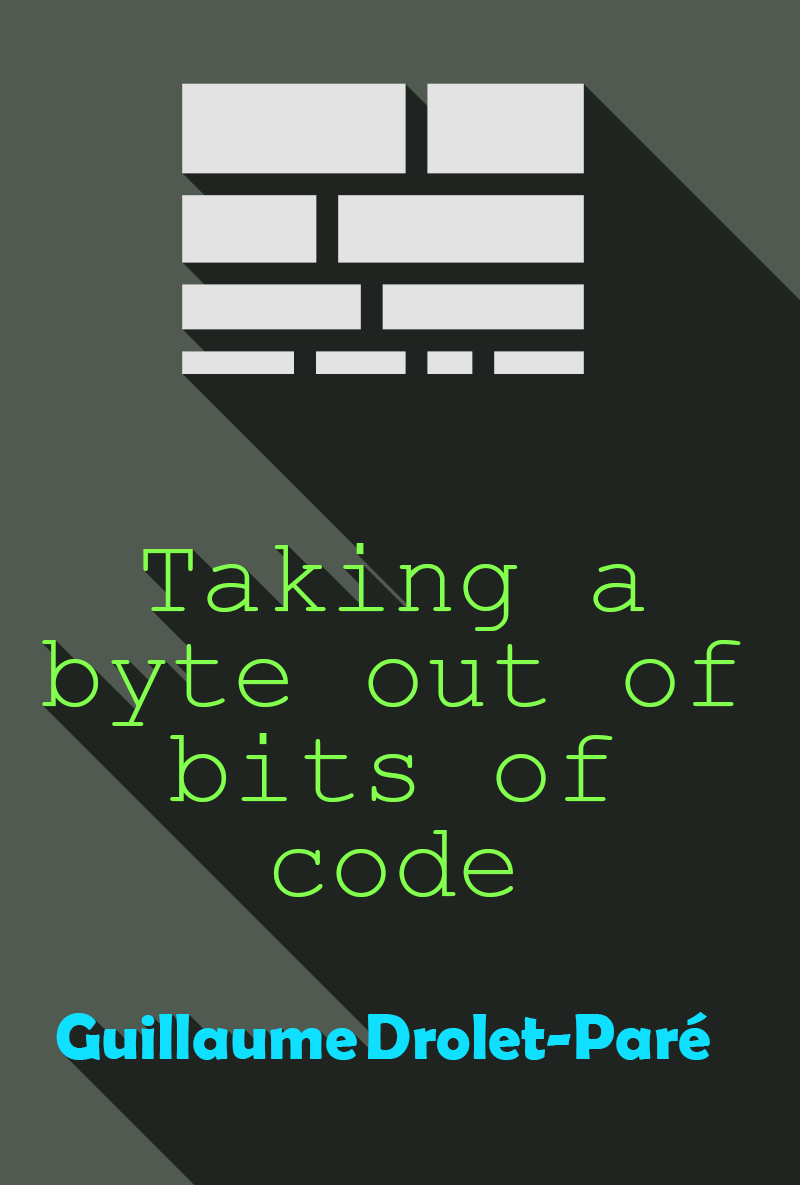
<style>
.page{position:relative;width:800px;height:1185px;background:#202420}
.page>*{position:absolute;margin:0}
.t1{font:107px/95px "CourierNewPSMT";color:#83ff4d}
.t2{font:65px "BerlinSansFBDemi-Bold";color:#10e0ff}
</style>
<div class="page">
<p class="t1" style="left:42px;top:543px;width:699px;height:354px;text-align:center">Taking a byte out of bits of code</p>
<p class="t2" style="left:56px;top:1012px;width:654px;height:48px">Guillaume Drolet-Paré</p>
</div>
